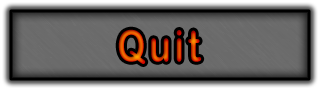
<style>
.page{position:relative;width:321px;height:91px}
.page>*{position:absolute;margin:0}
.t1{font:43.2px "ArialRoundedMTBold";letter-spacing:0.1em;scale:0.83 1}
</style>
<div class="page">
<p class="t1" style="left:118px;top:29px;width:84px;height:35px">Quit</p>
</div>
